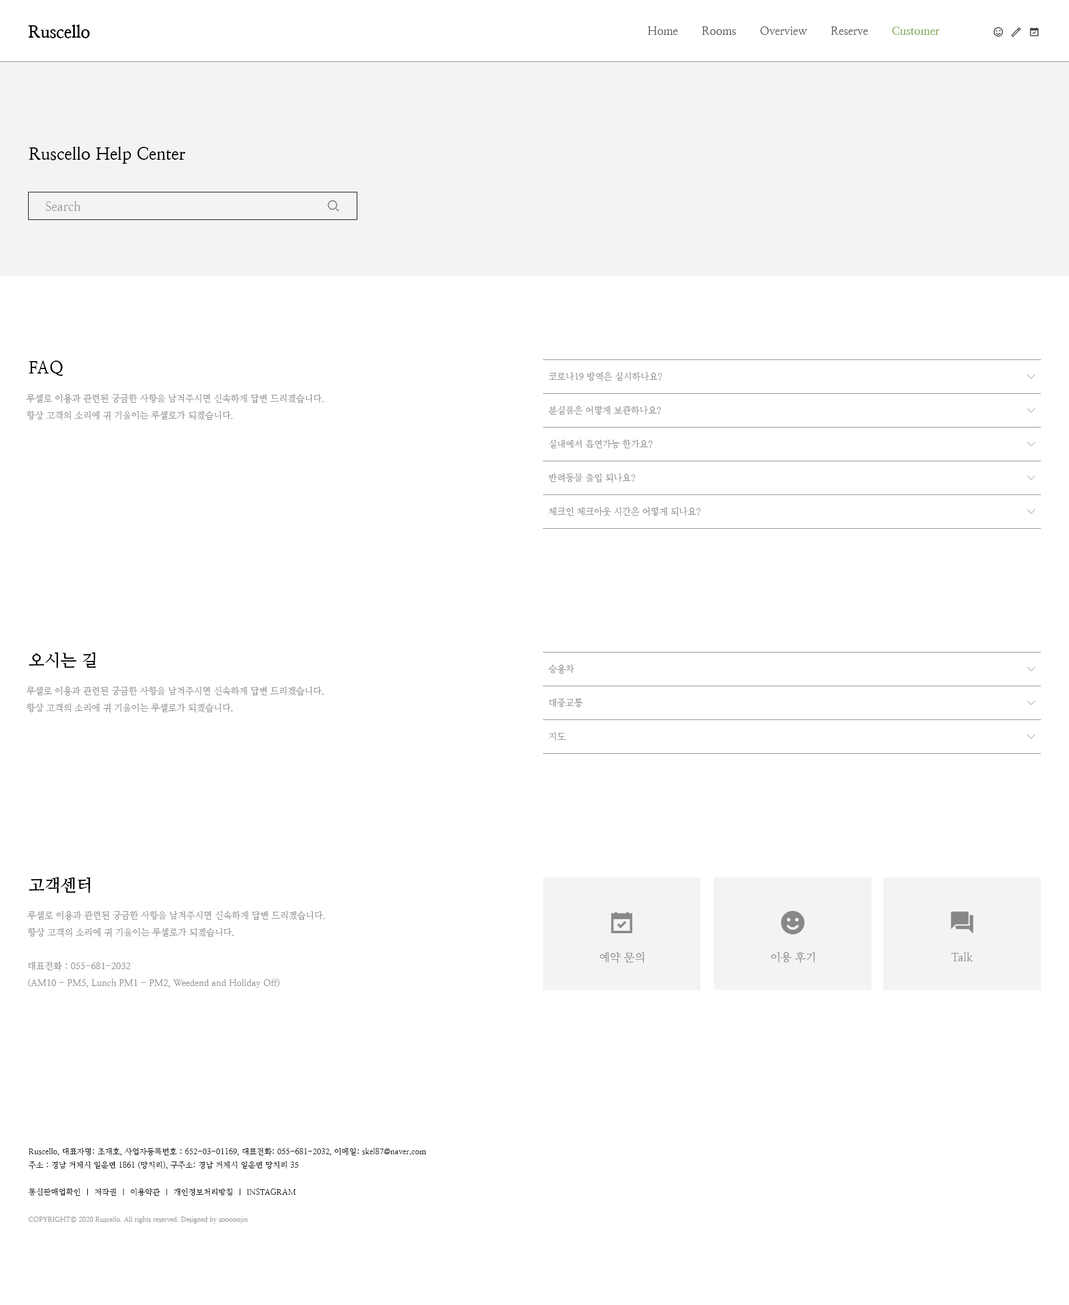
<style>
.page{position:relative;width:1069px;height:1305px;background:#ffffff}
.page>*{position:absolute;margin:0}
.t1{font:16.9px "NanumMyeongjoExtraBold";color:#000000}
.t2{font:11.2px "NanumMyeongjo";color:#444444}
.t3{font:11.2px "NanumMyeongjoExtraBold";color:#8fb26c}
.t4{font:16.9px "NanumMyeongjoBold";color:#000000}
.t5{font:12.4px "NanumMyeongjo";color:#888888}
.t6{font:9px "NanumMyeongjo";color:#888888}
.t7{font:9px/16.9px "NanumMyeongjo";color:#888888}
.t8{font:11.2px "NanumMyeongjo";color:#888888}
.t9{font:7.9px/13.5px "NanumMyeongjo";color:#000000}
.t10{font:6.8px/13.5px "NanumMyeongjo";color:#888888}
</style>
<div class="page">
<p class="t1" style="left:28px;top:24px;width:62px;height:14px">Ruscello</p>
<p class="t2" style="left:647px;top:26px;width:292px;height:9px">Home       Rooms       Overview       Reserve       <span class="t3">Customer</span></p>
<p class="t4" style="left:29px;top:146px;width:157px;height:18px">Ruscello Help Center</p>
<p class="t5" style="left:46px;top:201px;width:34px;height:10px">Search</p>
<p class="t4" style="left:29px;top:361px;width:34px;height:15px">FAQ</p>
<p class="t6" style="left:548px;top:372px;width:114px;height:9px">코로나19 방역은 실시하나요?</p>
<p class="t7" style="left:26px;top:394px;width:297px;height:27px">루셀로 이용과 관련된 궁금한 사항을 남겨주시면 신속하게 답변 드리겠습니다.<br>항상 고객의 소리에 귀 기울이는 루셀로가 되겠습니다.</p>
<p class="t6" style="left:548px;top:406px;width:113px;height:9px">분실품은 어떻게 보관하나요?</p>
<p class="t6" style="left:548px;top:439px;width:104px;height:9px">실내에서 흡연가능 한가요?</p>
<p class="t6" style="left:548px;top:473px;width:87px;height:10px">반려동물 출입 되나요?</p>
<p class="t6" style="left:548px;top:507px;width:152px;height:9px">체크인 체크아웃 시간은 어떻게 되나요?</p>
<p class="t4" style="left:29px;top:652px;width:67px;height:16px">오시는 길</p>
<p class="t6" style="left:548px;top:664px;width:26px;height:10px">승용차</p>
<p class="t7" style="left:26px;top:686px;width:297px;height:27px">루셀로 이용과 관련된 궁금한 사항을 남겨주시면 신속하게 답변 드리겠습니다.<br>항상 고객의 소리에 귀 기울이는 루셀로가 되겠습니다.</p>
<p class="t6" style="left:548px;top:698px;width:35px;height:9px">대중교통</p>
<p class="t6" style="left:548px;top:732px;width:17px;height:9px">지도</p>
<p class="t4" style="left:29px;top:877px;width:62px;height:17px">고객센터</p>
<p class="t7" style="left:28px;top:911px;width:297px;height:77px">루셀로 이용과 관련된 궁금한 사항을 남겨주시면 신속하게 답변 드리겠습니다.<br>항상 고객의 소리에 귀 기울이는 루셀로가 되겠습니다.<br><br>대표전화 : 055-681-2032<br>(AM10 - PM5, Lunch PM1 - PM2, Weedend and Holiday Off)</p>
<p class="t8" style="left:600px;top:952px;width:44px;height:11px">예약 문의</p>
<p class="t8" style="left:771px;top:952px;width:43px;height:11px">이용 후기</p>
<p class="t8" style="left:951px;top:952px;width:22px;height:9px">Talk</p>
<p class="t9" style="left:28px;top:1148px;width:398px;height:75px">Ruscello, 대표자명: 조재호, 사업자등록번호 : 652-03-01169, 대표전화: 055-681-2032, 이메일: skel87@naver.com<br>주소 : 경남 거제시 일운면 1861 (망치리), 구주소: 경남 거제시 일운면 망치리 35<br><br>통신판매업확인  |  저작권  |  이용약관  |  개인정보처리방침  |  INSTAGRAM<br><br><span class="t10">COPYRIGHT© 2020 Ruscello. All rights reserved. Designed by sooooojin</span></p>
</div>
